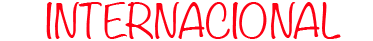
<style>
.page{position:relative;width:373px;height:41px;background:#ffffff}
.page>*{position:absolute;margin:0}
.t1{font:42.3px "Noteworthy-Light";color:#fd0113}
</style>
<div class="page">
<p class="t1" style="left:46px;top:2px;width:295px;height:37px">INTERNACIONAL</p>
</div>
